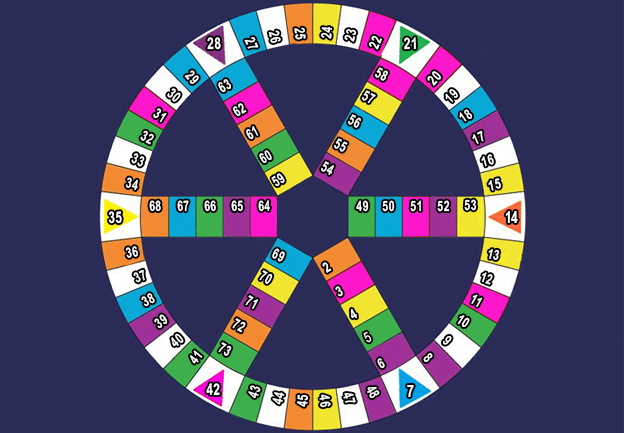
<style>
.page{position:relative;width:624px;height:433px;background:#2b2b57}
.page>*{position:absolute;margin:0}
.t1{font:14.2px "Arial-BoldMT";letter-spacing:0.05em;color:#ffffff;scale:0.74 1}
.t2{font:14px "Arial-BoldMT";letter-spacing:0.05em;color:#ffffff;scale:0.76 1}
.t3{font:16px "Arial-BoldMT";letter-spacing:0.05em;color:#ffffff;scale:0.74 1}
.t4{font:15.7px "Arial-BoldMT";letter-spacing:0.05em;color:#ffffff;scale:0.76 1}
.t5{font:14.3px "Arial-BoldMT";letter-spacing:0.05em;color:#ffffff;scale:0.71 1}
.t6{font:15.7px "Arial-BoldMT";letter-spacing:-0.05em;color:#ffffff;scale:0.76 1}
.t7{font:14px "Arial-BoldMT";letter-spacing:-0.01em;color:#ffffff;scale:0.76 1}
.t8{font:14px "Arial-BoldMT";letter-spacing:0.45em;color:#ffffff;scale:0.76 1}
.t9{font:14px "Arial-BoldMT";letter-spacing:-0.01em;color:#ffffff;scale:0.74 1}
.t10{font:14px "ArialMT";letter-spacing:0.45em;color:#ffffff;scale:0.76 1}
.t11{font:17.5px "Arial-BoldMT";letter-spacing:0.45em;color:#ffffff;scale:0.76 1}
</style>
<div class="page">
<p class="t1" style="left:268px;top:30px;width:13px;height:13px;rotate:77deg">26</p>
<p class="t1" style="left:294px;top:27px;width:12px;height:13px;rotate:85deg">25</p>
<p class="t2" style="left:321px;top:27px;width:11px;height:12px;rotate:-84deg">24</p>
<p class="t2" style="left:344px;top:29px;width:13px;height:13px;rotate:-77deg">23</p>
<p class="t3" style="left:207px;top:37px;width:14px;height:13px;rotate:-1deg">28</p>
<p class="t1" style="left:244px;top:37px;width:15px;height:12px;rotate:67deg">27</p>
<p class="t2" style="left:369px;top:35px;width:13px;height:15px;rotate:-67deg">22</p>
<p class="t4" style="left:404px;top:37px;width:12px;height:13px;rotate:-1deg">21</p>
<p class="t1" style="left:184px;top:70px;width:15px;height:14px;rotate:48deg">29</p>
<p class="t5" style="left:375px;top:67px;width:13px;height:14px;rotate:26deg">58</p>
<p class="t2" style="left:427px;top:71px;width:14px;height:15px;rotate:-48deg">20</p>
<p class="t1" style="left:167px;top:88px;width:14px;height:14px;rotate:40deg">30</p>
<p class="t5" style="left:218px;top:79px;width:13px;height:14px;rotate:-28deg">63</p>
<p class="t2" style="left:445px;top:89px;width:13px;height:14px;rotate:-43deg">19</p>
<p class="t5" style="left:362px;top:90px;width:14px;height:14px;rotate:26deg">57</p>
<p class="t1" style="left:153px;top:108px;width:14px;height:15px;rotate:32deg">31</p>
<p class="t5" style="left:233px;top:103px;width:14px;height:13px;rotate:-30deg">62</p>
<p class="t2" style="left:459px;top:109px;width:14px;height:13px;rotate:-34deg">18</p>
<p class="t5" style="left:246px;top:126px;width:13px;height:14px;rotate:-28deg">61</p>
<p class="t5" style="left:348px;top:114px;width:13px;height:14px;rotate:26deg">56</p>
<p class="t1" style="left:140px;top:130px;width:14px;height:15px;rotate:26deg">32</p>
<p class="t2" style="left:472px;top:130px;width:12px;height:14px;rotate:-24deg">17</p>
<p class="t5" style="left:259px;top:150px;width:13px;height:13px;rotate:-29deg">60</p>
<p class="t5" style="left:334px;top:138px;width:14px;height:14px;rotate:26deg">55</p>
<p class="t1" style="left:131px;top:153px;width:14px;height:14px;rotate:21deg">33</p>
<p class="t5" style="left:321px;top:161px;width:13px;height:14px;rotate:26deg">54</p>
<p class="t2" style="left:481px;top:154px;width:13px;height:13px;rotate:-15deg">16</p>
<p class="t5" style="left:271px;top:173px;width:14px;height:13px;rotate:-33deg">59</p>
<p class="t1" style="left:125px;top:177px;width:13px;height:13px;rotate:12deg">34</p>
<p class="t2" style="left:488px;top:178px;width:13px;height:13px;rotate:-12deg">15</p>
<p class="t5" style="left:149px;top:200px;width:12px;height:12px;rotate:-2deg">68</p>
<p class="t5" style="left:177px;top:200px;width:12px;height:12px;rotate:-2deg">67</p>
<p class="t5" style="left:204px;top:200px;width:12px;height:12px;rotate:-2deg">66</p>
<p class="t5" style="left:231px;top:200px;width:12px;height:12px;rotate:-2deg">65</p>
<p class="t5" style="left:258px;top:200px;width:12px;height:12px;rotate:-2deg">64</p>
<p class="t1" style="left:356px;top:200px;width:13px;height:12px;rotate:-1deg">49</p>
<p class="t1" style="left:382px;top:200px;width:13px;height:12px;rotate:-1deg">50</p>
<p class="t1" style="left:410px;top:200px;width:12px;height:12px;rotate:-1deg">51</p>
<p class="t1" style="left:437px;top:200px;width:13px;height:12px;rotate:-1deg">52</p>
<p class="t1" style="left:464px;top:199px;width:13px;height:12px;rotate:-1deg">53</p>
<p class="t3" style="left:108px;top:211px;width:14px;height:13px;rotate:-1deg">35</p>
<p class="t6" style="left:505px;top:211px;width:13px;height:12px">14</p>
<p class="t1" style="left:125px;top:246px;width:13px;height:12px;rotate:-10deg">36</p>
<p class="t5" style="left:272px;top:248px;width:13px;height:14px;rotate:24deg">69</p>
<p class="t7" style="left:488px;top:249px;width:12px;height:11px;rotate:14deg">13</p>
<p class="t1" style="left:133px;top:269px;width:12px;height:14px;rotate:-23deg">37</p>
<p class="t5" style="left:259px;top:270px;width:14px;height:14px;rotate:28deg">70</p>
<p class="t8" style="left:322px;top:262px;width:10px;height:11px;rotate:-33deg">2</p>
<p class="t9" style="left:482px;top:272px;width:11px;height:13px;rotate:18deg">12</p>
<p class="t1" style="left:141px;top:293px;width:14px;height:14px;rotate:-26deg">38</p>
<p class="t8" style="left:335px;top:286px;width:8px;height:11px;rotate:-25deg">3</p>
<p class="t7" style="left:471px;top:294px;width:12px;height:13px;rotate:29deg">11</p>
<p class="t5" style="left:245px;top:295px;width:13px;height:14px;rotate:28deg">71</p>
<p class="t1" style="left:154px;top:314px;width:14px;height:14px;rotate:-32deg">39</p>
<p class="t5" style="left:232px;top:318px;width:14px;height:15px;rotate:28deg">72</p>
<p class="t8" style="left:350px;top:308px;width:7px;height:11px;rotate:-30deg">4</p>
<p class="t7" style="left:457px;top:315px;width:13px;height:12px;rotate:33deg">10</p>
<p class="t1" style="left:171px;top:333px;width:13px;height:14px;rotate:-40deg">40</p>
<p class="t5" style="left:218px;top:342px;width:14px;height:14px;rotate:28deg">73</p>
<p class="t10" style="left:363px;top:331px;width:9px;height:12px;rotate:-29deg">5</p>
<p class="t8" style="left:442px;top:335px;width:10px;height:10px;rotate:43deg">9</p>
<p class="t1" style="left:190px;top:350px;width:13px;height:14px;rotate:-51deg">41</p>
<p class="t8" style="left:423px;top:353px;width:10px;height:9px;rotate:45deg">8</p>
<p class="t8" style="left:377px;top:358px;width:8px;height:11px;rotate:-27deg">6</p>
<p class="t3" style="left:206px;top:383px;width:14px;height:13px;rotate:-2deg">42</p>
<p class="t1" style="left:248px;top:385px;width:13px;height:14px;rotate:-71deg">43</p>
<p class="t1" style="left:367px;top:386px;width:13px;height:12px;rotate:61deg">48</p>
<p class="t11" style="left:407px;top:385px;width:7px;height:12px">7</p>
<p class="t1" style="left:272px;top:392px;width:13px;height:13px;rotate:-77deg">44</p>
<p class="t1" style="left:297px;top:394px;width:11px;height:13px;rotate:-85deg">45</p>
<p class="t1" style="left:319px;top:394px;width:12px;height:14px;rotate:83deg">46</p>
<p class="t1" style="left:343px;top:393px;width:13px;height:10px;rotate:72deg">47</p>
</div>
